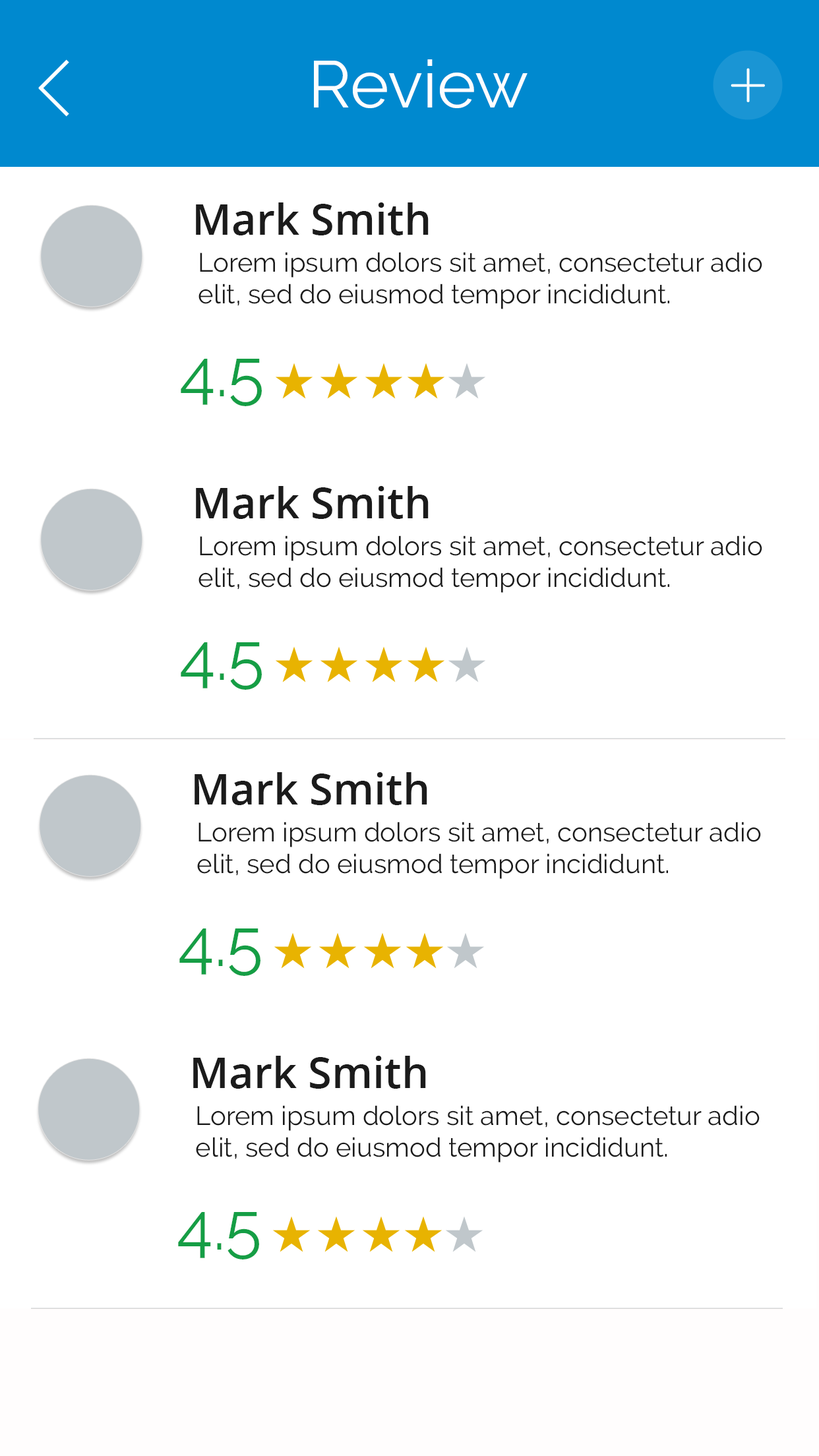
<style>
.page{position:relative;width:819px;height:1456px;background:#ffffff}
.page>*{position:absolute;margin:0}
.t1{font:65.9px "Raleway-Regular";color:#fdfeff}
.t2{font:42.9px "OpenSans-Semibold";color:#1b1b1b}
.t3{font:26.4px/31.7px "Raleway-Regular";color:#1b1b1b}
.t4{font:65.9px "Raleway-Regular";color:#159e45}
</style>
<div class="page">
<p class="t1" style="left:314px;top:59px;width:214px;height:49px">Review</p>
<p class="t2" style="left:196px;top:202px;width:233px;height:33px">Mark Smith</p>
<p class="t3" style="left:198px;top:252px;width:564px;height:57px">Lorem ipsum dolors sit amet, consectetur adio<br>elit, sed do eiusmod tempor incididunt.</p>
<p class="t4" style="left:181px;top:359px;width:81px;height:47px">4.5</p>
<p class="t2" style="left:196px;top:486px;width:233px;height:33px">Mark Smith</p>
<p class="t3" style="left:198px;top:535px;width:564px;height:58px">Lorem ipsum dolors sit amet, consectetur adio<br>elit, sed do eiusmod tempor incididunt.</p>
<p class="t4" style="left:181px;top:642px;width:81px;height:48px">4.5</p>
<p class="t2" style="left:195px;top:772px;width:232px;height:33px">Mark Smith</p>
<p class="t3" style="left:197px;top:822px;width:564px;height:57px">Lorem ipsum dolors sit amet, consectetur adio<br>elit, sed do eiusmod tempor incididunt.</p>
<p class="t4" style="left:179px;top:928px;width:81px;height:48px">4.5</p>
<p class="t2" style="left:193px;top:1056px;width:233px;height:33px">Mark Smith</p>
<p class="t3" style="left:196px;top:1105px;width:564px;height:58px">Lorem ipsum dolors sit amet, consectetur adio<br>elit, sed do eiusmod tempor incididunt.</p>
<p class="t4" style="left:178px;top:1212px;width:81px;height:47px">4.5</p>
</div>
